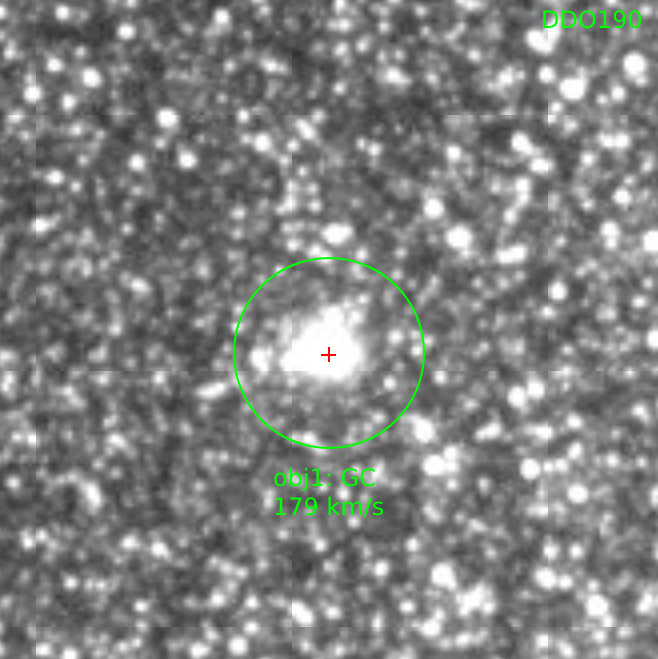
<style>
.page{position:relative;width:658px;height:659px}
.page>*{position:absolute;margin:0}
.t1{font:24px "DejaVuSans";color:#00ff00}
</style>
<div class="page">
<p class="t1" style="left:543px;top:10px;width:99px;height:19px">DDO190</p>
<p class="t1" style="left:274px;top:467px;width:110px;height:51px">obj1: GC<br>179 km/s</p>
</div>
